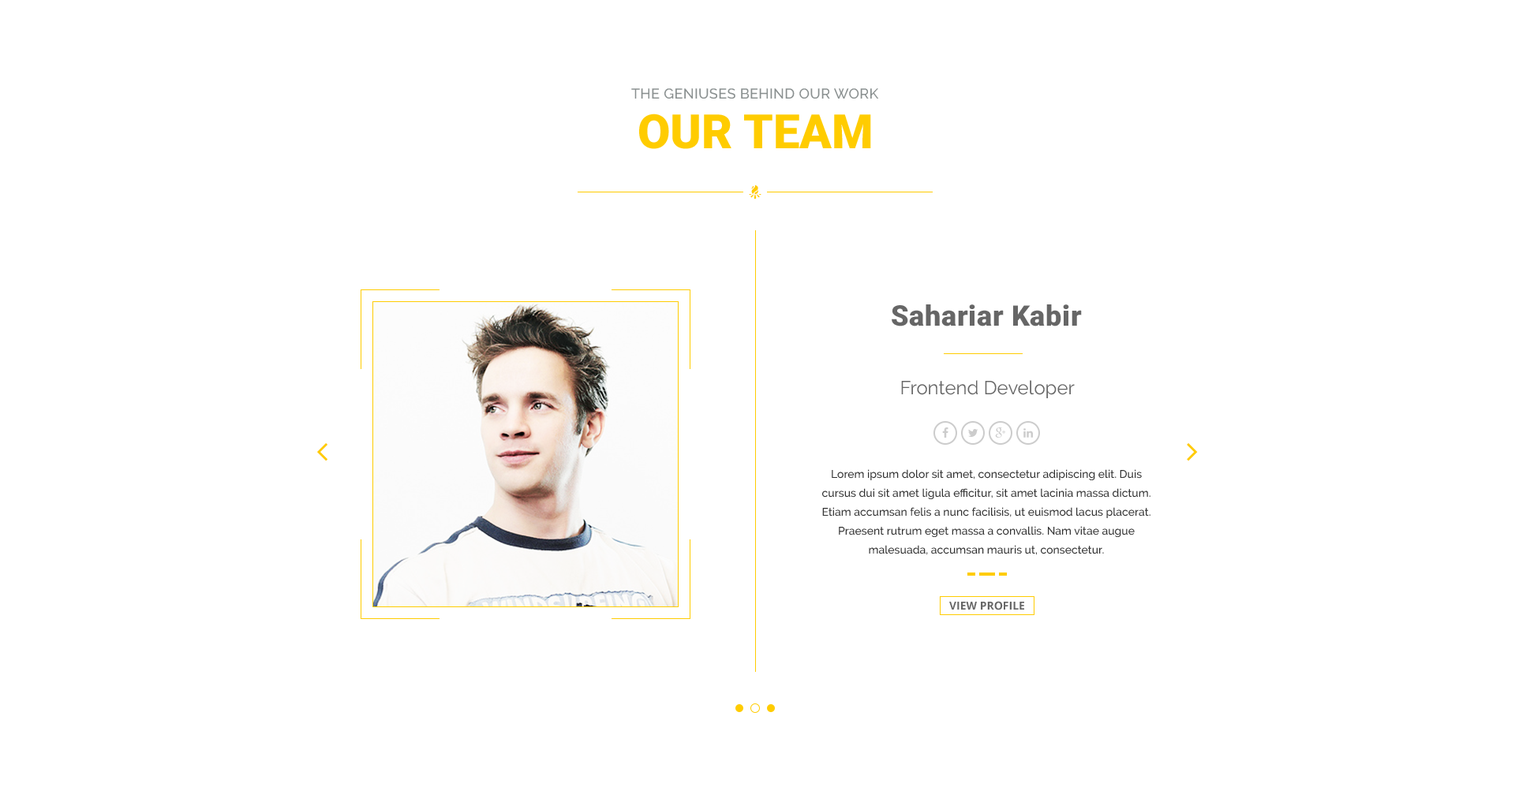
<style>
.page{position:relative;width:1515px;height:787px;background:#ffffff}
.page>*{position:absolute;margin:0}
.t1{font:14.2px "Raleway-Medium";letter-spacing:0.02em;color:#898f8f}
.t2{font:47.3px "Roboto-Black";color:#ffcc00}
.t3{font:28.4px "Roboto-Black";letter-spacing:0.02em;color:#666666}
.t4{font:18.9px "Raleway-Regular";color:#666666}
.t5{font:11px/18.9px "Raleway-Medium";color:#333333}
.t6{font:11px "OpenSans-Bold";color:#666666}
</style>
<div class="page">
<p class="t1" style="left:631px;top:88px;width:248px;height:11px">THE GENIUSES BEHIND OUR WORK</p>
<p class="t2" style="left:639px;top:114px;width:232px;height:35px">OUR TEAM</p>
<p class="t3" style="left:891px;top:305px;width:191px;height:22px">Sahariar Kabir</p>
<p class="t4" style="left:901px;top:380px;width:173px;height:18px">Frontend Developer</p>
<p class="t5" style="left:822px;top:469px;width:328px;height:86px;text-align:center">Lorem ipsum dolor sit amet, consectetur adipiscing elit. Duis cursus dui sit amet ligula efficitur, sit amet lacinia massa dictum. Etiam accumsan felis a nunc facilisis, ut euismod lacus placerat. Praesent rutrum eget massa a convallis. Nam vitae augue malesuada, accumsan mauris ut, consectetur.</p>
<p class="t6" style="left:949px;top:601px;width:75px;height:10px">VIEW PROFILE</p>
</div>
